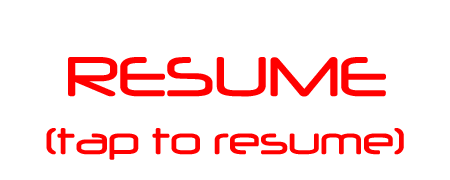
<style>
.page{position:relative;width:450px;height:180px;background:#ffffff}
.page>*{position:absolute;margin:0}
.t1{font:66px "Neuropol";color:#ff0000}
.t2{font:44px "Neuropol";color:#ff0000}
</style>
<div class="page">
<p class="t1" style="left:68px;top:57px;width:318px;height:40px">RESUME</p>
<p class="t2" style="left:46px;top:128px;width:358px;height:32px">(tap to resume)</p>
</div>
